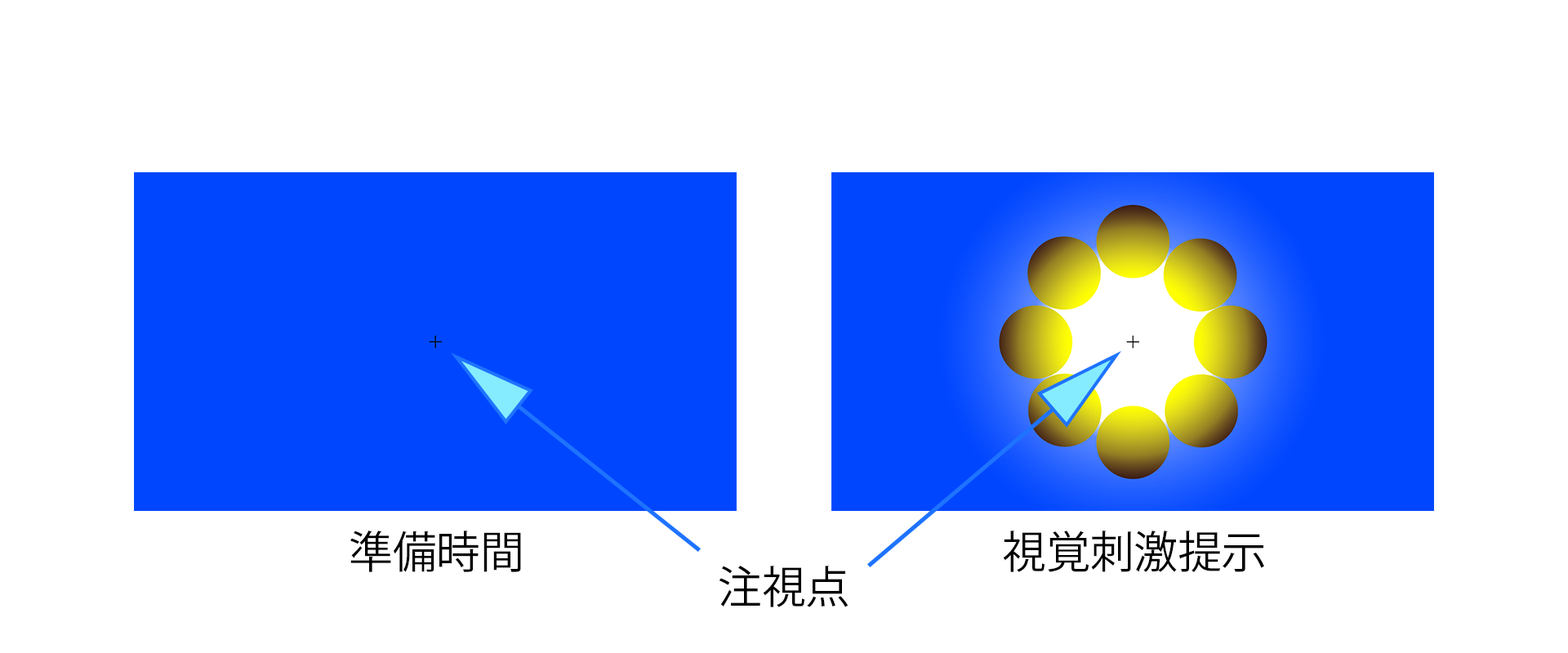
<style>
.page{position:relative;width:1568px;height:653px;background:#ffffff}
.page>*{position:absolute;margin:0}
.t1{font:44.2px "KozGoPr6N-Regular";color:#000000}
</style>
<div class="page">
<p class="t1" style="left:350px;top:531px;width:171px;height:41px">準備時間</p>
<p class="t1" style="left:1003px;top:531px;width:261px;height:41px">視覚刺激提示</p>
<p class="t1" style="left:719px;top:566px;width:130px;height:42px">注視点</p>
</div>
